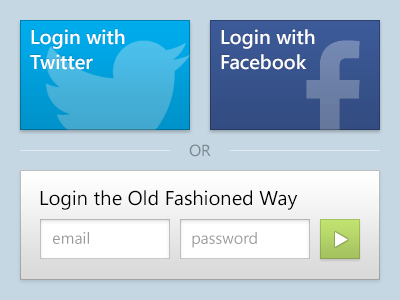
<style>
.page{position:relative;width:400px;height:300px;background:#c5d7e3}
.page>*{position:absolute;margin:0}
.t1{font:20px/25px "SegoeUI-SemiBold";color:#ffffff}
.t2{font:16px "SegoeUI";color:#7c8890}
.t3{font:20px "SegoeUI";color:#000000}
.t4{font:16px "SegoeUI";color:#999999}
</style>
<div class="page">
<p class="t1" style="left:30px;top:29px;width:95px;height:41px">Login with<br>Twitter</p>
<p class="t1" style="left:221px;top:29px;width:94px;height:41px">Login with<br>Facebook</p>
<p class="t2" style="left:189px;top:144px;width:22px;height:13px">OR</p>
<p class="t3" style="left:40px;top:190px;width:258px;height:20px">Login the Old Fashioned Way</p>
<p class="t4" style="left:53px;top:232px;width:36px;height:12px">email</p>
<p class="t4" style="left:192px;top:232px;width:65px;height:16px">password</p>
</div>
